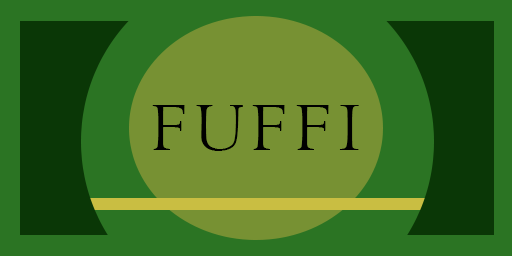
<style>
.page{position:relative;width:512px;height:256px;background:#2b7423}
.page>*{position:absolute;margin:0}
.t1{font:72px "Centaur";letter-spacing:0.12em;color:#000000;scale:0.95 1}
</style>
<div class="page">
<p class="t1" style="left:152px;top:105px;width:207px;height:46px">FUFFI</p>
</div>
